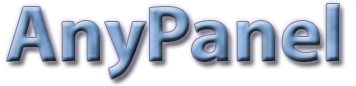
<style>
.page{position:relative;width:356px;height:86px;background:#ffffff}
.page>*{position:absolute;margin:0}
.t1{font:80px "MyriadPro-Bold"}
</style>
<div class="page">
<p class="t1" style="left:7px;top:4px;width:332px;height:75px">AnyPanel</p>
</div>
